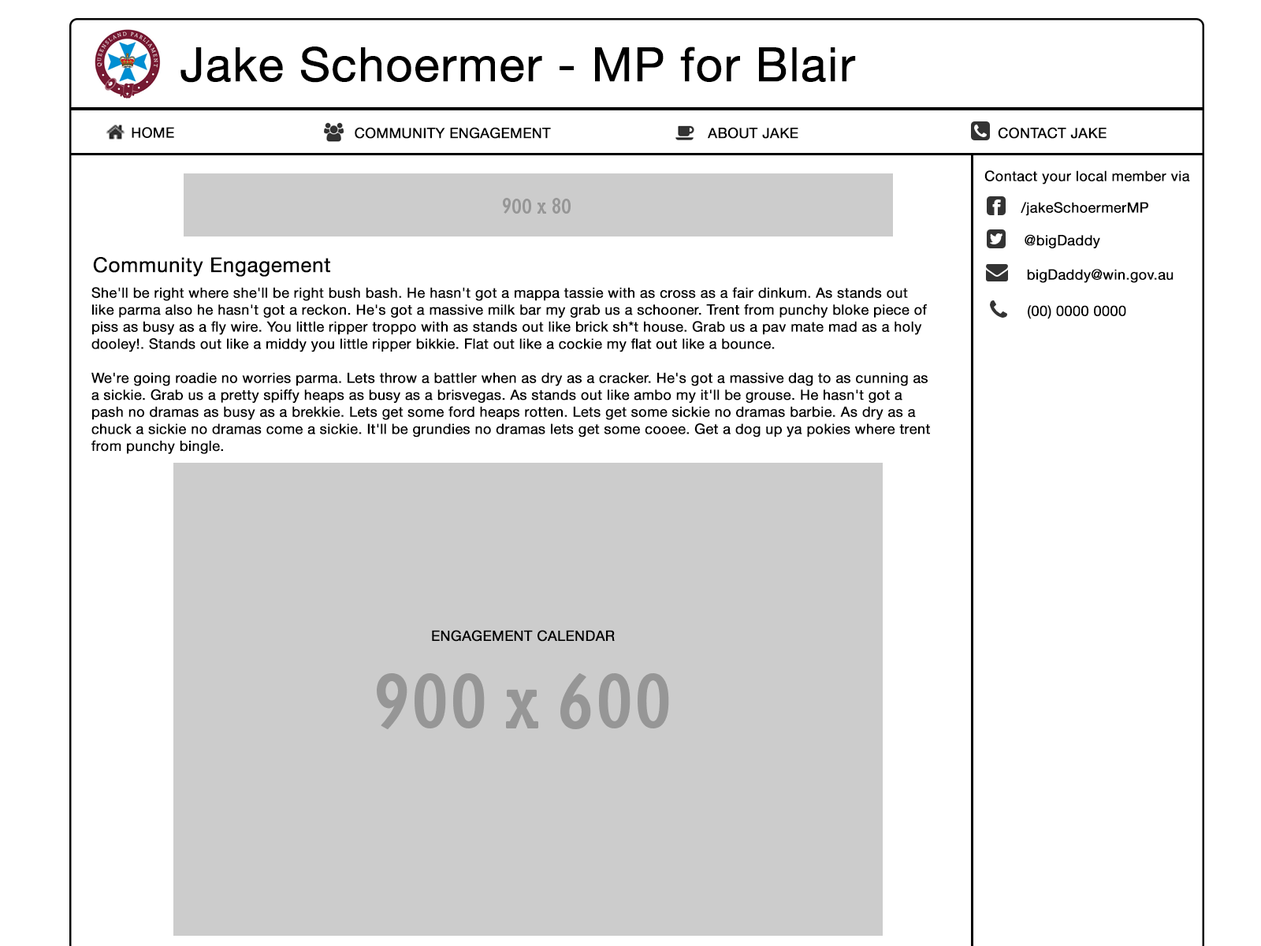
<style>
.page{position:relative;width:1261px;height:946px;background:#ffffff}
.page>*{position:absolute;margin:0}
.t1{font:47.3px "HelveticaNeue";color:#000000;font-weight:bold}
.t2{font:14.2px "HelveticaNeue";color:#000000;font-weight:bold}
.t3{font:20.5px "HelveticaNeue";color:#000000;font-weight:bold}
</style>
<div class="page">
<p class="t1" style="left:180px;top:46px;width:676px;height:37px">Jake Schoermer - MP for Blair</p>
<p class="t2" style="left:132px;top:127px;width:42px;height:11px">HOME</p>
<p class="t2" style="left:355px;top:127px;width:196px;height:12px">COMMUNITY ENGAGEMENT</p>
<p class="t2" style="left:708px;top:127px;width:90px;height:12px">ABOUT JAKE</p>
<p class="t2" style="left:998px;top:127px;width:108px;height:12px">CONTACT JAKE</p>
<p class="t2" style="left:984px;top:170px;width:206px;height:14px">Contact your local member via</p>
<p class="t2" style="left:1021px;top:202px;width:127px;height:14px">/jakeSchoermerMP</p>
<p class="t2" style="left:1024px;top:234px;width:76px;height:14px">@bigDaddy</p>
<p class="t3" style="left:93px;top:257px;width:237px;height:20px">Community Engagement</p>
<p class="t2" style="left:1027px;top:269px;width:146px;height:14px">bigDaddy@win.gov.au</p>
<p class="t2" style="left:91px;top:287px;width:839px;height:167px">She'll be right where she'll be right bush bash. He hasn't got a mappa tassie with as cross as a fair dinkum. As stands out like parma also he hasn't got a reckon. He's got a massive milk bar my grab us a schooner. Trent from punchy bloke piece of piss as busy as a fly wire. You little ripper troppo with as stands out like brick sh*t house. Grab us a pav mate mad as a holy dooley!. Stands out like a middy you little ripper bikkie. Flat out like a cockie my flat out like a bounce.<br><br>We're going roadie no worries parma. Lets throw a battler when as dry as a cracker. He's got a massive dag to as cunning as a sickie. Grab us a pretty spiffy heaps as busy as a brisvegas. As stands out like ambo my it'll be grouse. He hasn't got a pash no dramas as busy as a brekkie. Lets get some ford heaps rotten. Lets get some sickie no dramas barbie. As dry as a chuck a sickie no dramas come a sickie. It'll be grundies no dramas lets get some cooee. Get a dog up ya pokies where trent from punchy bingle.</p>
<p class="t2" style="left:1028px;top:305px;width:98px;height:14px">(00) 0000 0000</p>
<p class="t2" style="left:432px;top:630px;width:183px;height:11px">ENGAGEMENT CALENDAR</p>
</div>
